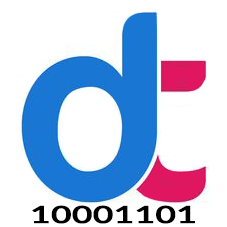
<style>
.page{position:relative;width:227px;height:227px;background:#ffffff}
.page>*{position:absolute;margin:0}
.t1{font:24px "Lato-Bold";color:#000000;scale:1.5 1}
</style>
<div class="page">
<p class="t1" style="left:32px;top:205px;width:163px;height:19px">10001101</p>
</div>
